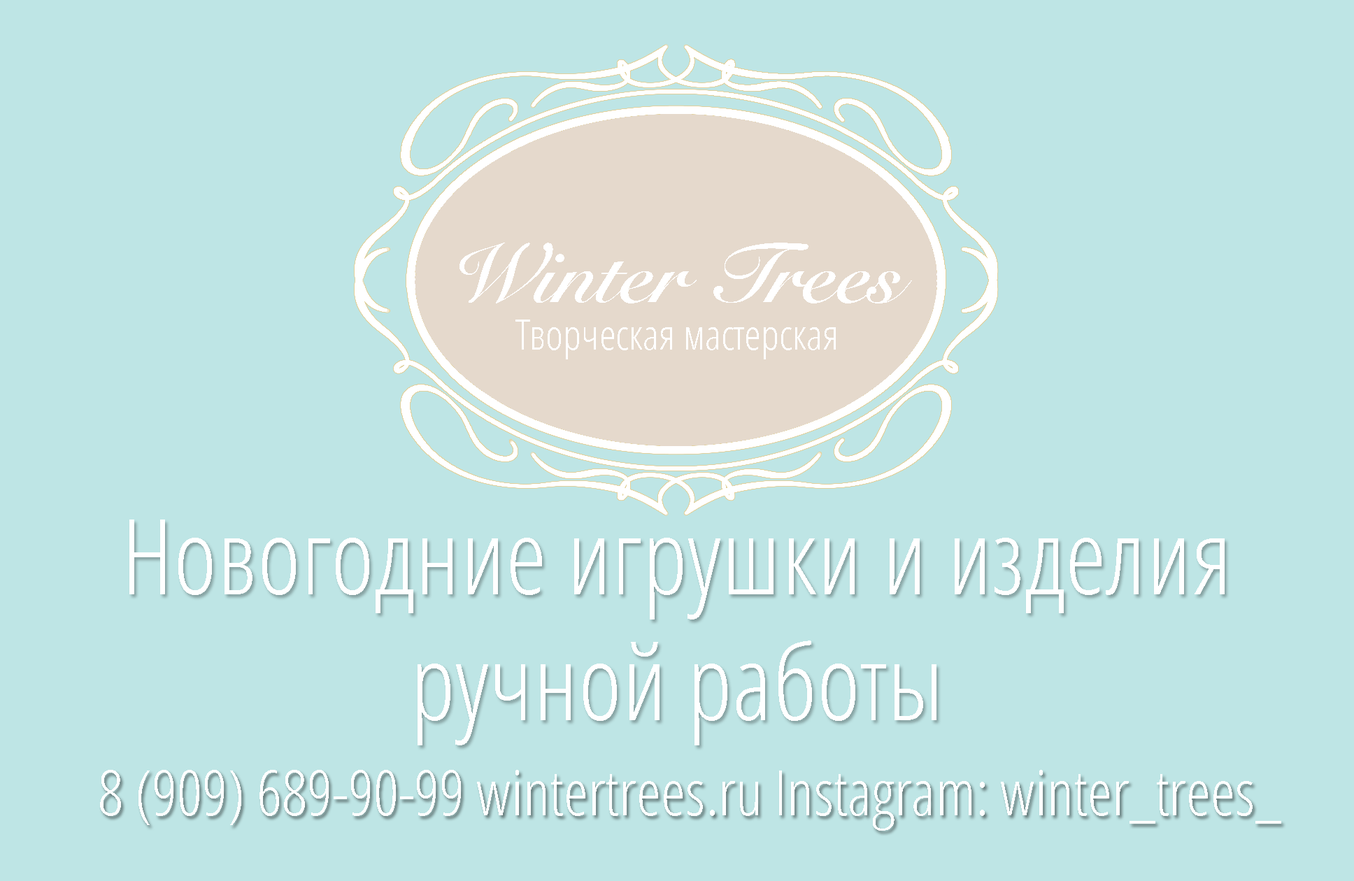
<style>
.page{position:relative;width:1354px;height:881px;background:#bee5e5}
.page>*{position:absolute;margin:0}
.t1{font:83.9px "SnellRoundhandW01-Bold";color:#ffffff}
.t2{font:41.9px "OpenSans-CondensedLight";color:#ffffff}
.t3{font:104.9px "OpenSans-CondensedLight";color:#ffffff}
.t4{font:62.9px "OpenSans-CondensedLight";color:#ffffff}
</style>
<div class="page">
<p class="t1" style="left:459px;top:243px;width:453px;height:60px">Winter Trees</p>
<p class="t2" style="left:515px;top:320px;width:321px;height:39px">Творческая мастерская</p>
<p class="t3" style="left:129px;top:519px;width:1095px;height:226px;text-align:center">Новогодние игрушки и изделия ручной работы</p>
<p class="t4" style="left:100px;top:770px;width:1181px;height:61px">8 (909) 689-90-99 wintertrees.ru Instagram: winter_trees_</p>
</div>
